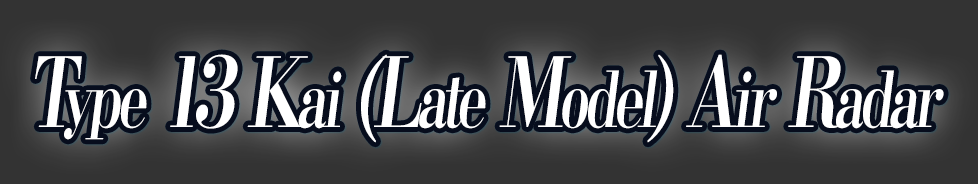
<style>
.page{position:relative;width:978px;height:184px;background:#333333}
.page>*{position:absolute;margin:0}
.t1{font:96px "KochoStd-Heavy";letter-spacing:-0.08em;color:#ffffff;font-style:italic;scale:0.72 1}
.t2{font:76.8px "KochoStd-Heavy";letter-spacing:-0.08em;color:#ffffff;font-style:italic;scale:0.72 1}
</style>
<div class="page">
<p class="t1" style="left:35px;top:54px;width:909px;height:89px">T<span class="t2">ype</span> 13 K<span class="t2">ai</span> (L<span class="t2">ate</span> M<span class="t2">odel</span>) A<span class="t2">ir</span> R<span class="t2">adar</span></p>
</div>
